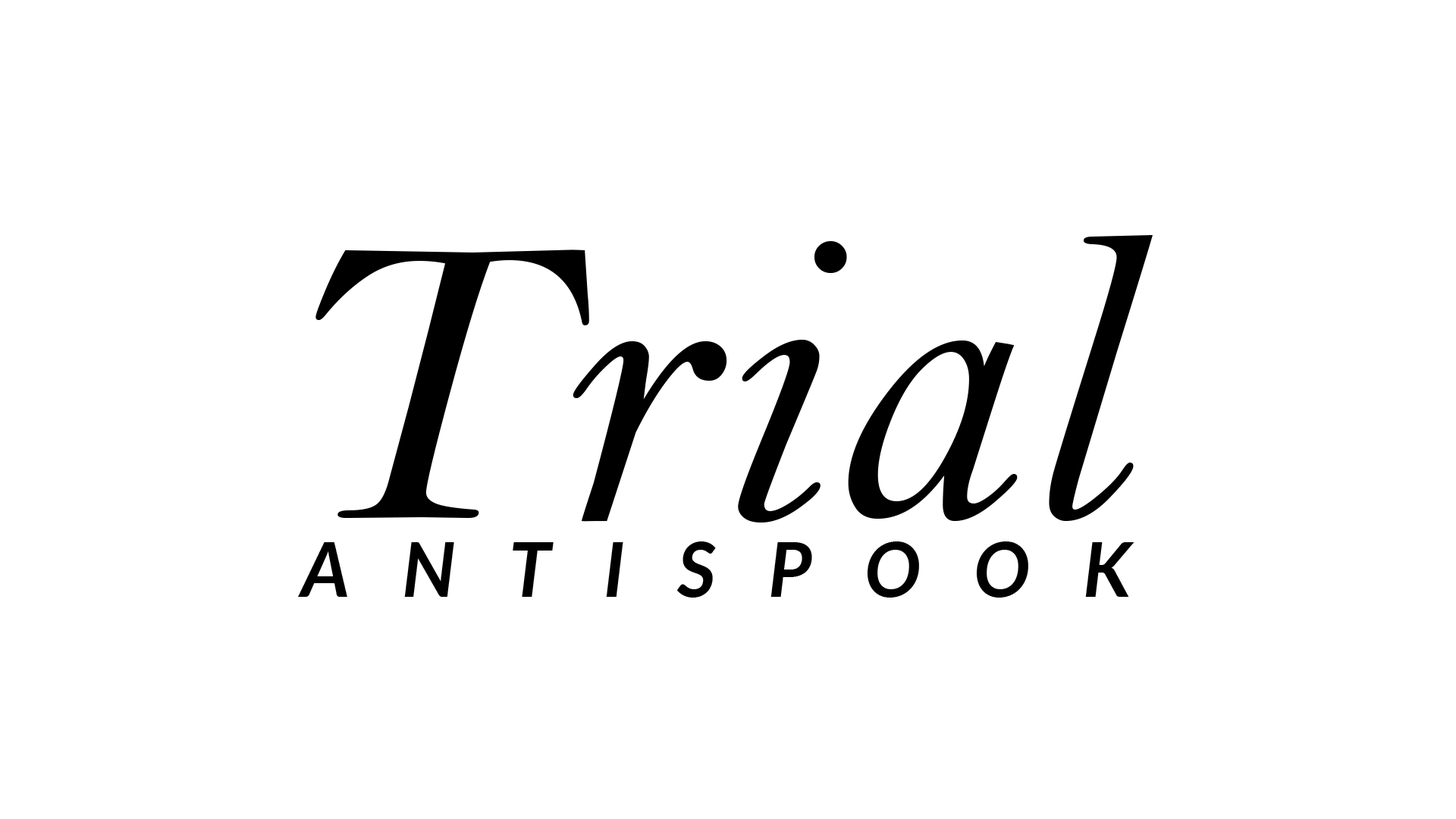
<style>
.page{position:relative;width:1456px;height:819px;background:#ffffff}
.page>*{position:absolute;margin:0}
.t1{font:420.6px "BellMTItalic";color:#000000}
.t2{font:75.1px "Lato-BoldItalic";letter-spacing:0.7em;color:#000000}
</style>
<div class="page">
<p class="t1" style="left:315px;top:235px;width:838px;height:287px">Trial</p>
<p class="t2" style="left:298px;top:541px;width:836px;height:57px">ANTISPOOK</p>
</div>
